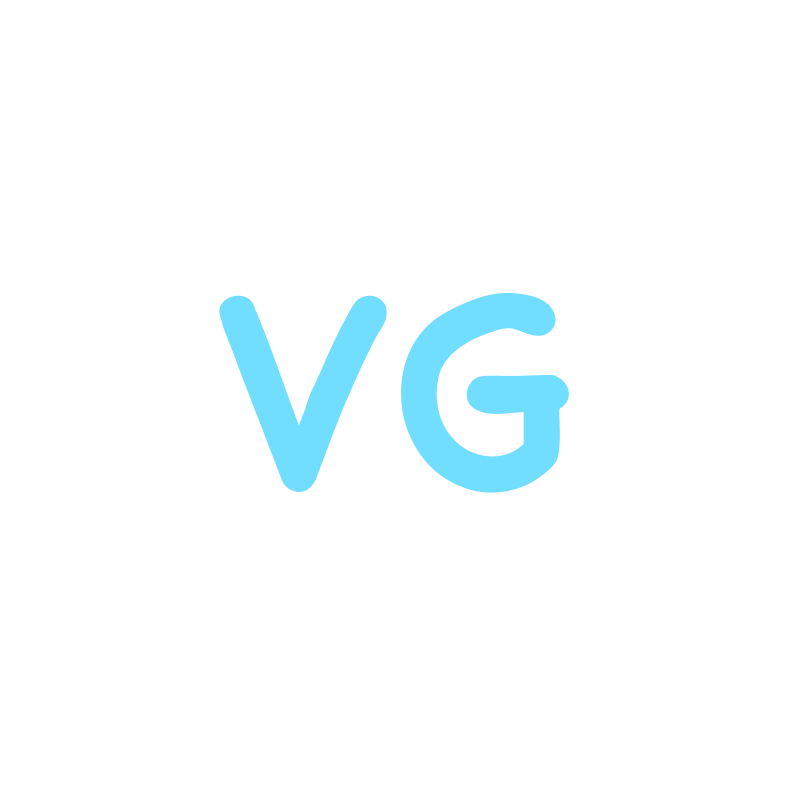
<style>
.page{position:relative;width:788px;height:788px;background:#ffffff}
.page>*{position:absolute;margin:0}
.t1{font:266.8px "ChalkboardSE-Bold";color:#71ddff}
</style>
<div class="page">
<p class="t1" style="left:219px;top:292px;width:350px;height:201px">VG</p>
</div>
